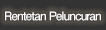
<style>
.page{position:relative;width:106px;height:30px;background:#333333}
.page>*{position:absolute;margin:0}
.t1{font:12px "FutoGoB101Pr5-Bold";letter-spacing:-0.08em;color:#ffffff}
</style>
<div class="page">
<p class="t1" style="left:5px;top:11px;width:96px;height:10px">Rentetan Peluncuran</p>
</div>
